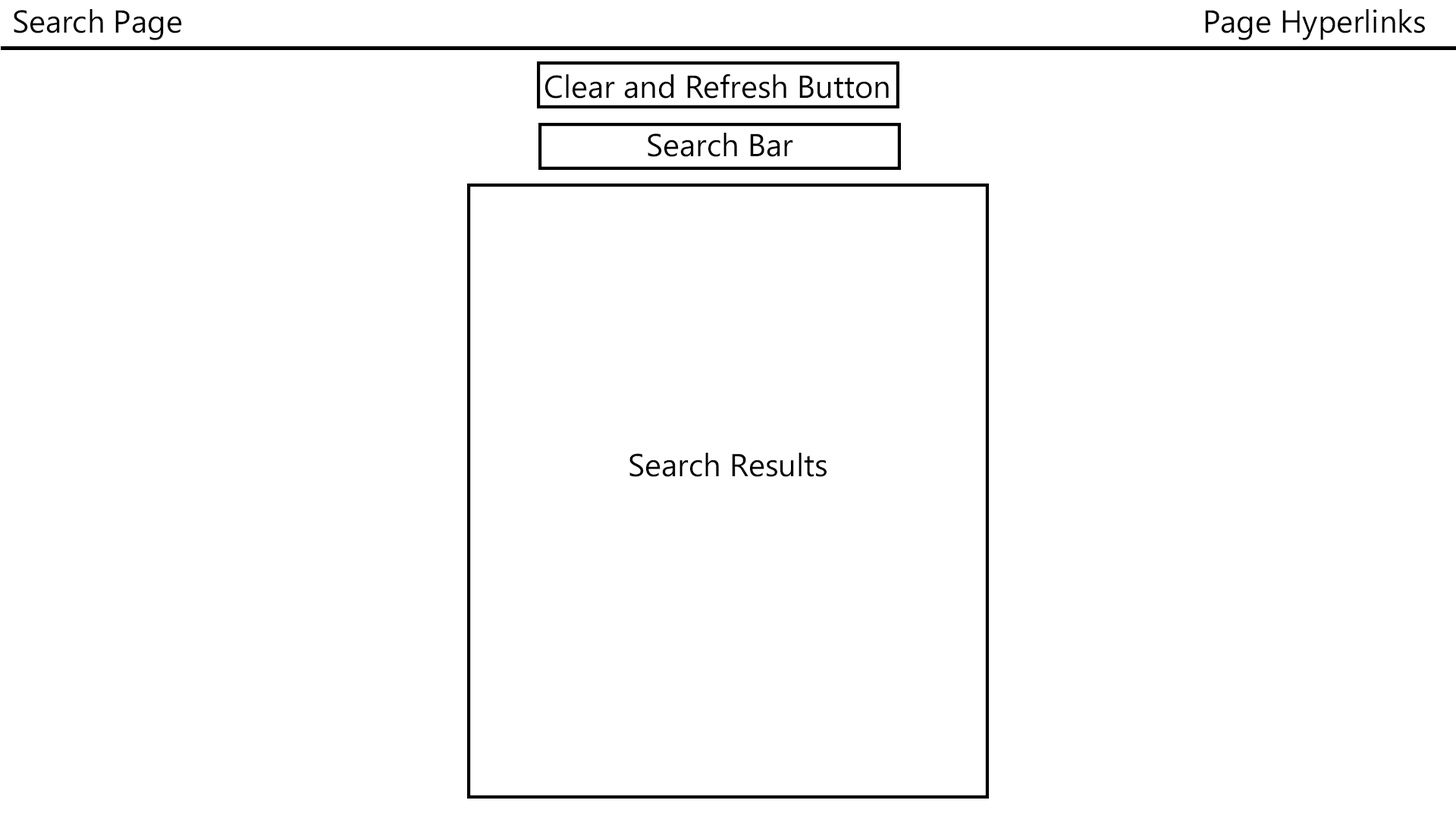
<style>
.page{position:relative;width:1456px;height:819px;background:#ffffff}
.page>*{position:absolute;margin:0}
.t1{font:31.6px "MicrosoftPhagsPa";color:#000000}
</style>
<div class="page">
<p class="t1" style="left:14px;top:9px;width:168px;height:31px">Search Page</p>
<p class="t1" style="left:1205px;top:9px;width:220px;height:31px">Page Hyperlinks</p>
<p class="t1" style="left:545px;top:74px;width:344px;height:25px">Clear and Refresh Button</p>
<p class="t1" style="left:648px;top:133px;width:145px;height:24px">Search Bar</p>
<p class="t1" style="left:629px;top:453px;width:198px;height:24px">Search Results</p>
</div>
